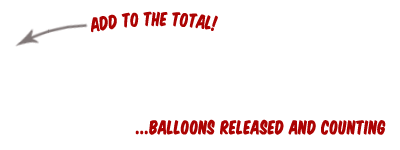
<style>
.page{position:relative;width:400px;height:150px;background:#ffffff}
.page>*{position:absolute;margin:0}
.t1{font:18px "VTCSuperMarketSale";color:#ac0302}
.t2{font:18px "VTCSuperMarketSale";color:#ac0302;font-weight:bold}
</style>
<div class="page">
<p class="t1" style="left:91px;top:11px;width:127px;height:22px">Add to the Total!</p>
<p class="t2" style="left:135px;top:119px;width:251px;height:16px">...Balloons released and counting</p>
</div>
